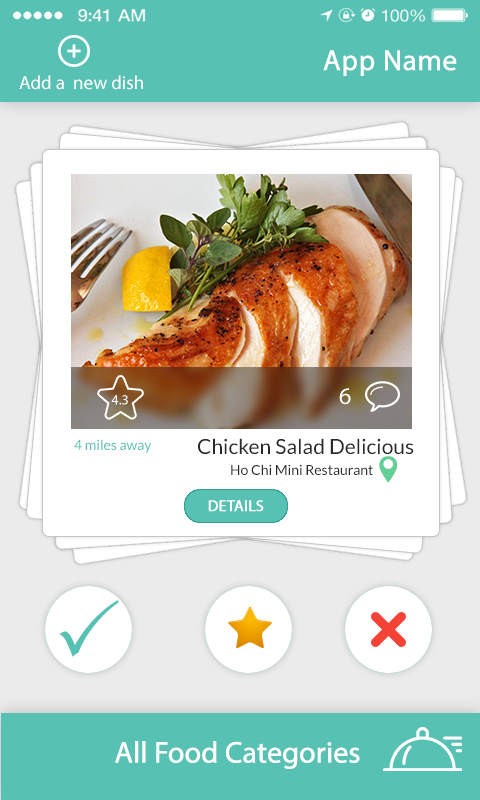
<style>
.page{position:relative;width:480px;height:800px;background:#ffffff}
.page>*{position:absolute;margin:0}
.t1{font:29px "MyriadPro-Regular";color:#ffffff;font-weight:bold}
.t2{font:19px "MyriadPro-Regular";color:#ffffff}
.t3{font:23.9px "MyriadPro-Regular";color:#ffffff}
.t4{font:14px "MyriadPro-Regular";color:#ffffff}
.t5{font:21px "Lato-Regular";color:#292929}
.t6{font:14px "Lato-Regular";color:#57c1b3}
.t7{font:14px "Lato-Regular";color:#292929}
.t8{font:15.6px "MyriadPro-Regular";color:#ffffff;font-weight:bold}
.t9{font:30px "MyriadPro-Regular";letter-spacing:-0.02em;color:#ffffff;font-weight:bold}
</style>
<div class="page">
<p class="t1" style="left:323px;top:50px;width:134px;height:26px">App Name</p>
<p class="t2" style="left:19px;top:75px;width:124px;height:15px">Add a  new dish</p>
<p class="t3" style="left:339px;top:388px;width:12px;height:17px">6</p>
<p class="t4" style="left:111px;top:395px;width:17px;height:10px">4.3</p>
<p class="t5" style="left:198px;top:438px;width:216px;height:16px">Chicken Salad Delicious</p>
<p class="t6" style="left:74px;top:439px;width:78px;height:14px">4 miles away</p>
<p class="t7" style="left:231px;top:464px;width:142px;height:11px">Ho Chi Mini Restaurant</p>
<p class="t8" style="left:208px;top:500px;width:56px;height:12px">DETAILS</p>
<p class="t9" style="left:115px;top:741px;width:245px;height:28px">All Food Categories</p>
</div>
